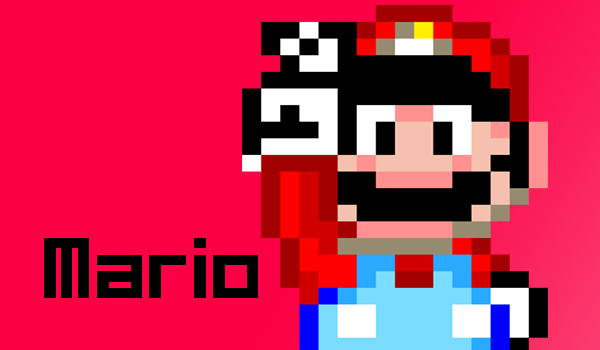
<style>
.page{position:relative;width:600px;height:350px;background:#fb0043}
.page>*{position:absolute;margin:0}
.t1{font:100px "Á¤9";color:#000000;font-weight:bold}
</style>
<div class="page">
<p class="t1" style="left:44px;top:238px;width:214px;height:60px">Mario</p>
</div>
